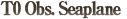
<style>
.page{position:relative;width:127px;height:19px;background:#ffffff}
.page>*{position:absolute;margin:0}
.t1{font:18px "RyuminPro-ExBold";letter-spacing:-0.08em;color:#4a3f32;font-weight:bold;scale:0.9 1}
</style>
<div class="page">
<p class="t1" style="left:0px;top:1px;width:121px;height:18px">T0 Obs. Seaplane</p>
</div>
